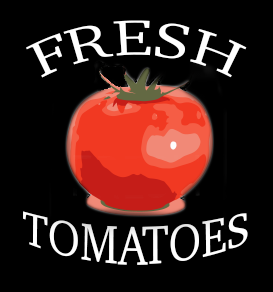
<style>
.page{position:relative;width:273px;height:292px;background:#000000}
.page>*{position:absolute;margin:0}
.t1{font:50px "Charter-Roman";color:#ffffff}
.t2{font:43.8px "Charter-Roman"}
.t3{font:50px "MyriadPro-Regular"}
</style>
<div class="page">
<p class="t1" style="left:26px;top:20px;width:221px;height:58px">FRESH</p>
<p class="t2" style="left:23px;top:155px;width:225px;height:110px;text-align:center"><span class="t3">FRESH<br></span>TOMATOES<br><span class="t3">T</span></p>
</div>
